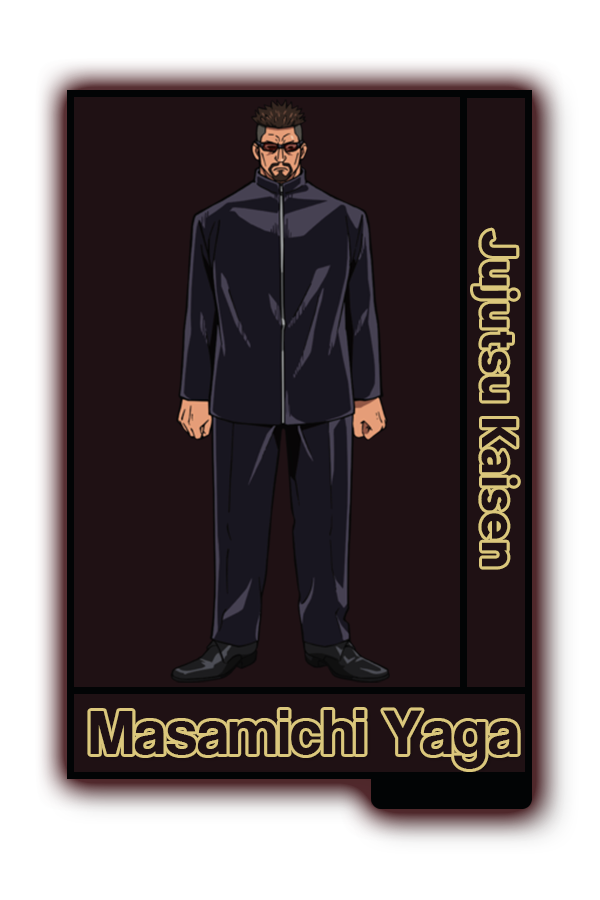
<style>
.page{position:relative;width:600px;height:900px;background:#1f1114}
.page>*{position:absolute;margin:0}
.t1{font:48.8px "MADETOMMY-Bold";color:#1e1214}
.t2{font:65.2px "CoolveticaRg-Regular";color:#1e1214}
</style>
<div class="page">
<p class="t1" style="left:473px;top:230px;width:45px;height:337px;rotate:90deg">Jujutsu Kaisen</p>
<p class="t2" style="left:90px;top:710px;width:428px;height:59px">Masamichi Yaga</p>
</div>
